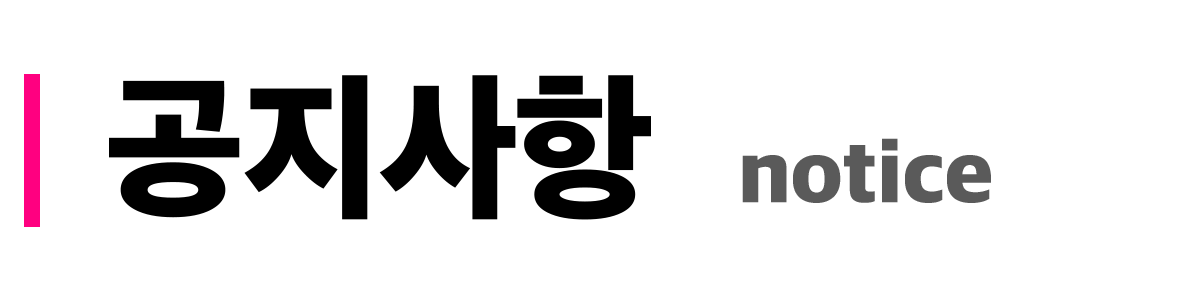
<style>
.page{position:relative;width:1200px;height:300px;background:#ffffff}
.page>*{position:absolute;margin:0}
.t1{font:90px "AppleSDGothicNeoH00";letter-spacing:-0.01em;color:#5a5a5a}
.t2{font:160px "AppleSDGothicNeoH00";letter-spacing:-0.01em;color:#000000}
</style>
<div class="page">
<p class="t1" style="left:109px;top:75px;width:882px;height:145px"><span class="t2">공지사항  </span>notice</p>
</div>
